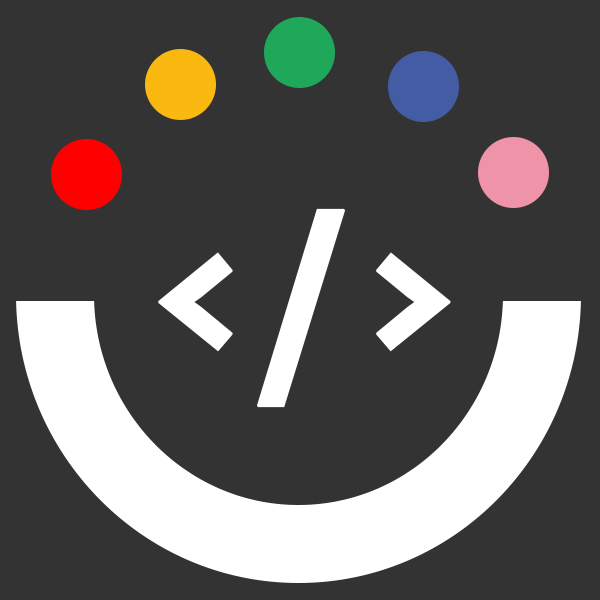
<style>
.page{position:relative;width:600px;height:600px;background:#333333}
.page>*{position:absolute;margin:0}
.t1{font:226.2px "Gentona-SemiBold";letter-spacing:0.02em;color:#ffffff;font-weight:bold}
</style>
<div class="page">
<p class="t1" style="left:158px;top:208px;width:293px;height:200px">&lt;/&gt;</p>
</div>
